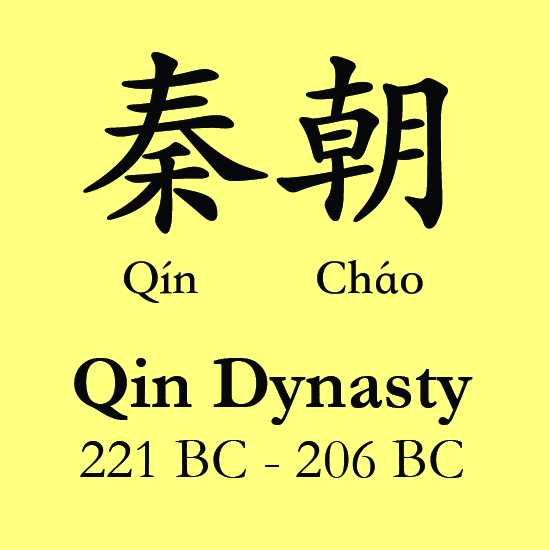
<style>
.page{position:relative;width:549px;height:550px;background:#ffff80}
.page>*{position:absolute;margin:0}
.t1{font:200px "STKaiti-SC-Bold";color:#070809}
.t2{font:50px "STKaiti-SC-Bold";color:#070809}
.t3{font:58.3px "Garamond";color:#070809}
.t4{font:75px "Garamond-Bold";color:#070809}
</style>
<div class="page">
<p class="t1" style="left:83px;top:52px;width:365px;height:182px">秦朝</p>
<p class="t2" style="left:124px;top:261px;width:74px;height:42px">Qín</p>
<p class="t2" style="left:317px;top:260px;width:106px;height:34px">Cháo</p>
<p class="t3" style="left:74px;top:358px;width:399px;height:120px;text-align:center"><span class="t4">Qin Dynasty<br></span>221 BC - 206 BC</p>
</div>
